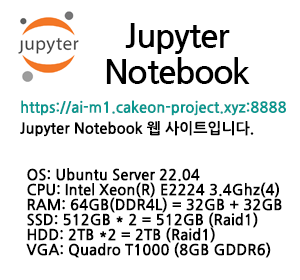
<style>
.page{position:relative;width:300px;height:280px;background:#ffffff}
.page>*{position:absolute;margin:0}
.t1{font:34px/36px "NanumGothicBold";letter-spacing:-0.04em;color:#000000}
.t2{font:15px "NanumGothicBold";color:#0a978f}
.t3{font:15px "NanumGothicBold";color:#000000}
.t4{font:15px/15px "NanumGothicBold";color:#000000}
</style>
<div class="page">
<p class="t1" style="left:106px;top:23px;width:144px;height:61px;text-align:center">Jupyter<br>Notebook</p>
<p class="t2" style="left:21px;top:100px;width:265px;height:16px">https://ai-m1.cakeon-project.xyz:8888</p>
<p class="t3" style="left:20px;top:121px;width:234px;height:16px">Jupyter Notebook 웹 사이트입니다.</p>
<p class="t4" style="left:26px;top:168px;width:256px;height:90px">OS: Ubuntu Server 22.04<br>CPU: Intel Xeon(R) E2224 3.4Ghz(4)<br>RAM: 64GB(DDR4L) = 32GB + 32GB<br>SSD: 512GB * 2 = 512GB (Raid1)<br>HDD: 2TB *2 = 2TB (Raid1)<br>VGA: Quadro T1000 (8GB GDDR6)</p>
</div>
